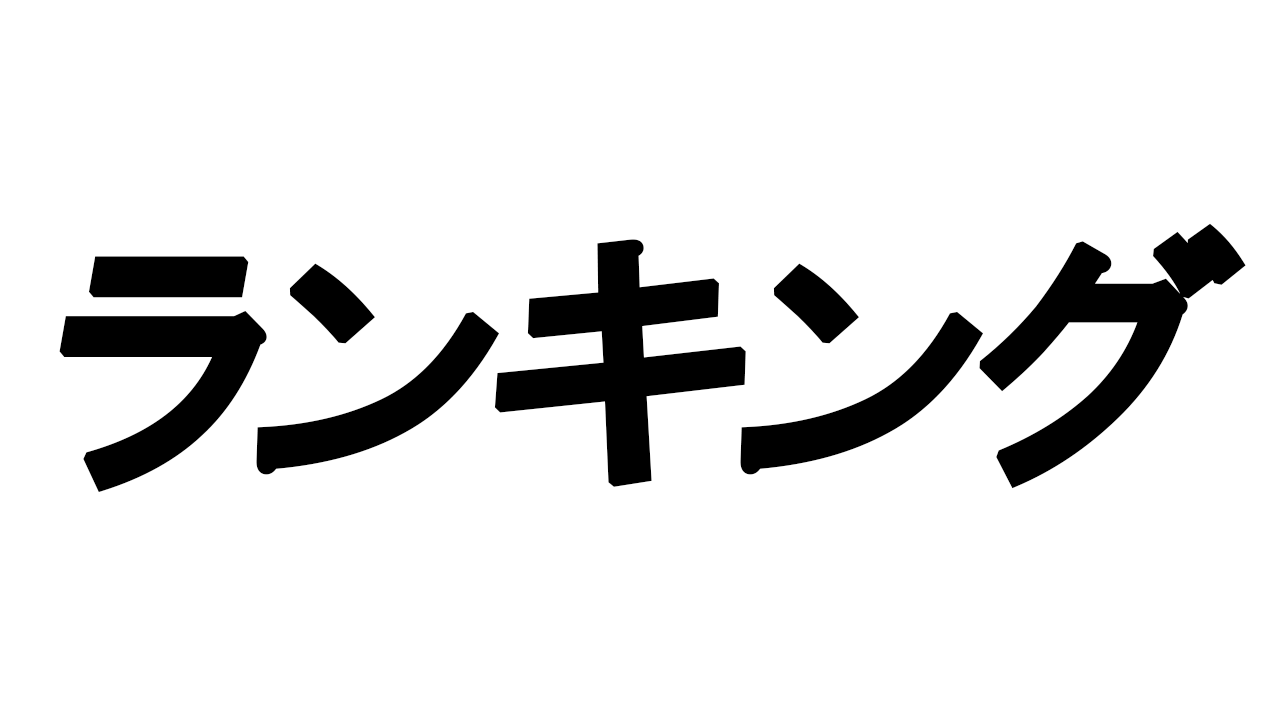
<style>
.page{position:relative;width:1280px;height:720px;background:#ffffff}
.page>*{position:absolute;margin:0}
.t1{font:268.3px "HGPGothicE";letter-spacing:-0.07em;color:#000000;font-weight:bold;font-style:italic}
</style>
<div class="page">
<p class="t1" style="left:59px;top:223px;width:1187px;height:270px">ランキング</p>
</div>
